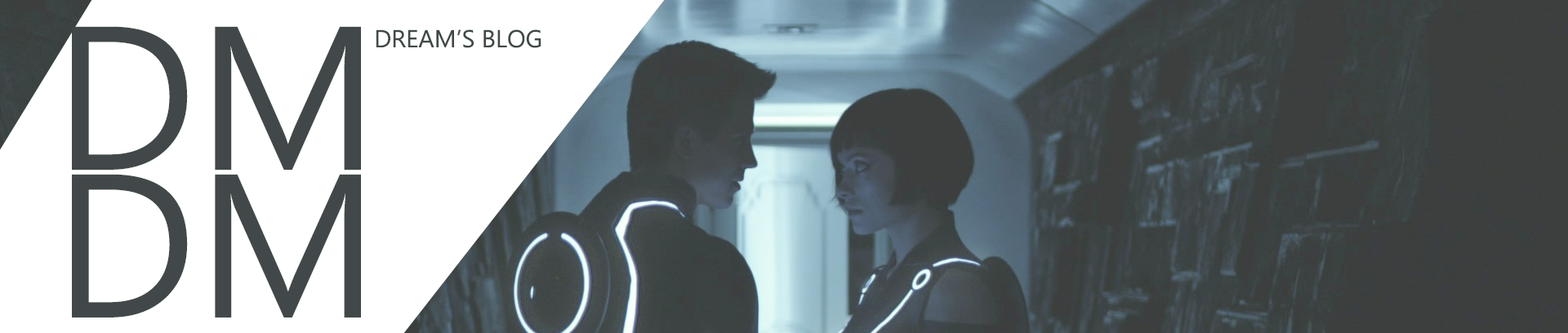
<style>
.page{position:relative;width:1568px;height:333px;background:#ffffff}
.page>*{position:absolute;margin:0}
.t1{font:204.2px "Gadugi";color:#33363b}
.t2{font:24.5px "Gadugi";color:#33363b}
</style>
<div class="page">
<p class="t1" style="left:72px;top:26px;width:289px;height:144px">DM</p>
<p class="t2" style="left:376px;top:29px;width:165px;height:19px">DREAM’S BLOG</p>
<p class="t1" style="left:72px;top:174px;width:289px;height:144px">DM</p>
</div>
